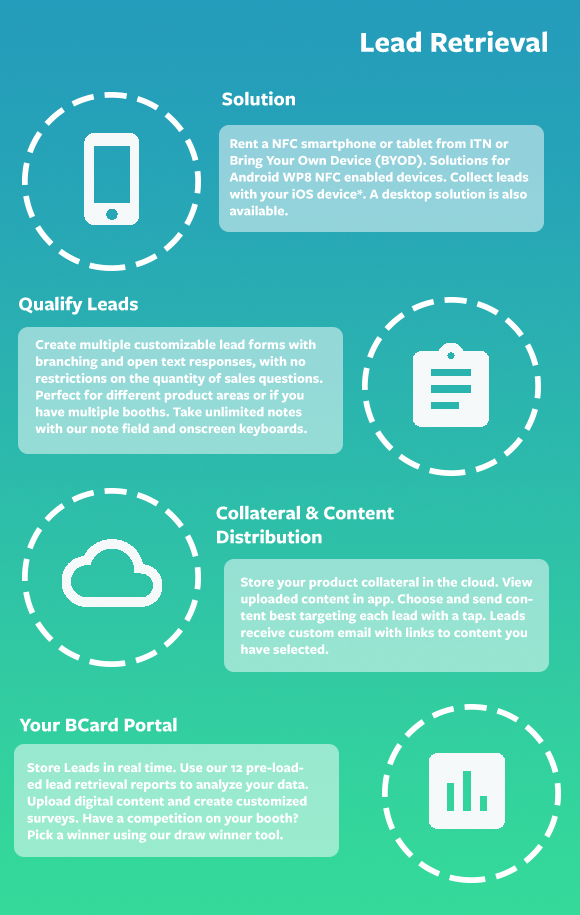
<style>
.page{position:relative;width:580px;height:915px}
.page>*{position:absolute;margin:0}
.t1{font:30px "FreightSansProBold-Regular";color:#ffffff}
.t2{font:20px "FreightSansProBold-Regular";color:#ffffff}
.t3{font:14px "FreightSansProBold-Regular";color:#ffffff}
</style>
<div class="page">
<p class="t1" style="left:361px;top:30px;width:186px;height:23px">Lead Retrieval</p>
<p class="t2" style="left:222px;top:91px;width:73px;height:15px">Solution</p>
<p class="t3" style="left:229px;top:138px;width:300px;height:78px">Rent a NFC smartphone or tablet from ITN or Bring Your Own Device (BYOD). Solutions for Android WP8 NFC enabled devices. Collect leads with your iOS device*. A desktop solution is also available.</p>
<p class="t2" style="left:19px;top:296px;width:119px;height:19px">Qualify Leads</p>
<p class="t3" style="left:35px;top:339px;width:288px;height:97px">Create multiple customizable lead forms with branching and open text responses, with no restrictions on the quantity of sales questions. Perfect for different product areas or if you have multiple booths. Take unlimited notes with our note field and onscreen keyboards.</p>
<p class="t2" style="left:216px;top:505px;width:178px;height:39px">Collateral &amp; Content Distribution</p>
<p class="t3" style="left:240px;top:576px;width:293px;height:78px">Store your product collateral in the cloud. View uploaded content in app. Choose and send content best targeting each lead with a tap. Leads receive custom email with links to content you have selected.</p>
<p class="t2" style="left:19px;top:717px;width:158px;height:15px">Your BCard Portal</p>
<p class="t3" style="left:27px;top:762px;width:281px;height:81px">Store Leads in real time. Use our 12 pre-loaded lead retrieval reports to analyze your data. Upload digital content and create customized surveys. Have a competition on your booth? Pick a winner using our draw winner tool.</p>
</div>
